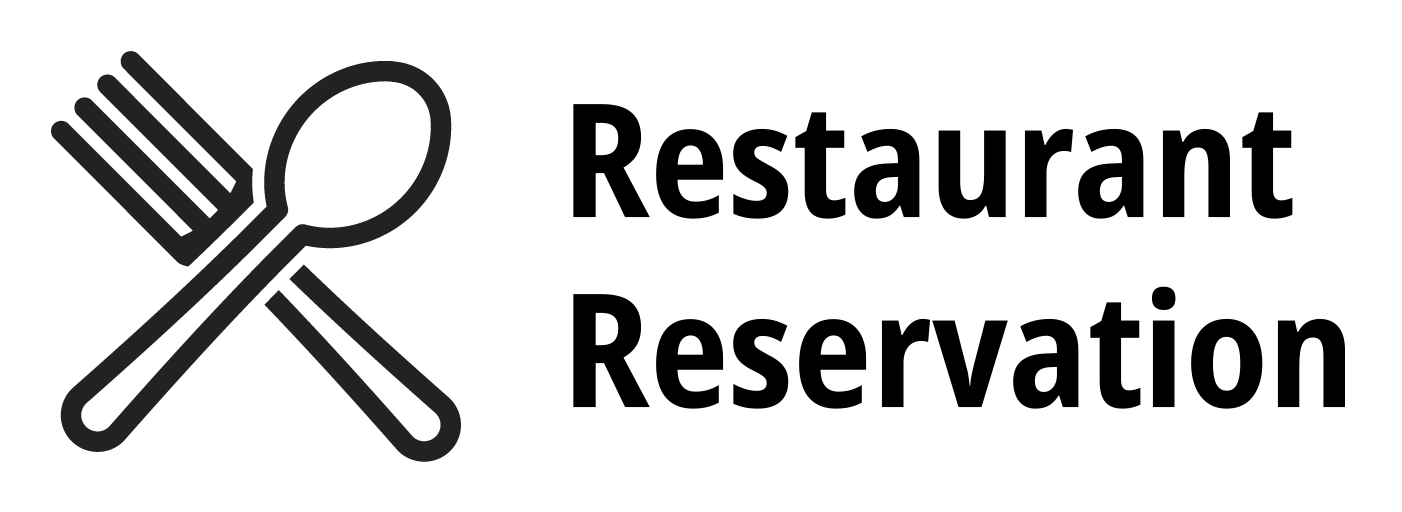
<style>
.page{position:relative;width:1402px;height:512px;background:#ffffff}
.page>*{position:absolute;margin:0}
.t1{font:158px "NotoSansThaiCondensed-Bold";color:#000000}
</style>
<div class="page">
<p class="t1" style="left:573px;top:104px;width:772px;height:305px">Restaurant<br>Reservation</p>
</div>
